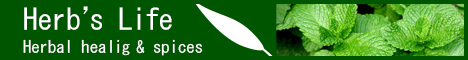
<style>
.page{position:relative;width:468px;height:60px;background:#005500}
.page>*{position:absolute;margin:0}
.t1{font:29.2px "MS-Gothic";color:#ffffff}
.t2{font:29.2px "MS-Gothic";letter-spacing:-0.72em;color:#ffffff}
.t3{font:29.2px "MS-Gothic";letter-spacing:-0.04em;color:#ffffff}
.t4{font:16.7px "MS-Gothic";color:#ffffff}
.t5{font:16.7px "MS-Gothic";letter-spacing:-0.06em;color:#ffffff}
</style>
<div class="page">
<p class="t1" style="left:24px;top:6px;width:148px;height:24px">Herb<span class="t2">’</span>s <span class="t3">Life</span></p>
<p class="t4" style="left:23px;top:39px;width:180px;height:17px">Herbal hea<span class="t5">lig </span>&amp; spices</p>
</div>
